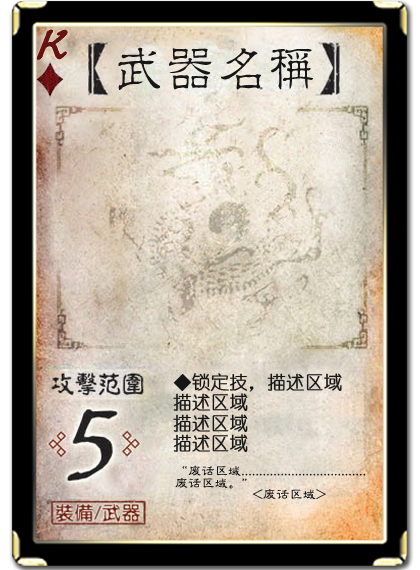
<style>
.page{position:relative;width:420px;height:570px}
.page>*{position:absolute;margin:0}
.t1{font:50.9px "Jxixinkai";color:#661213;font-weight:bold;font-style:italic}
.t2{font:50.9px "¾­µä·±½ÇÁ¥ Regular";color:#161616}
.t3{font:18.3px "YouYuan";color:#161616;font-weight:bold}
.t4{font:13.2px "FZLBJW--GB1-0";color:#161616}
</style>
<div class="page">
<p class="t1" style="left:37px;top:30px;width:31px;height:30px">K</p>
<p class="t2" style="left:118px;top:47px;width:195px;height:43px">武器名称</p>
<p class="t3" style="left:173px;top:373px;width:169px;height:19px">◆锁定技，描述区域</p>
<p class="t3" style="left:173px;top:393px;width:75px;height:18px">描述区域</p>
<p class="t3" style="left:173px;top:414px;width:75px;height:18px">描述区域</p>
<p class="t3" style="left:173px;top:434px;width:75px;height:18px">描述区域</p>
<p class="t4" style="left:182px;top:465px;width:184px;height:11px">“废话区域...................................</p>
<p class="t4" style="left:175px;top:477px;width:72px;height:12px">废话区域。”</p>
<p class="t4" style="left:252px;top:489px;width:74px;height:11px">&lt;废话区域&gt;</p>
</div>
